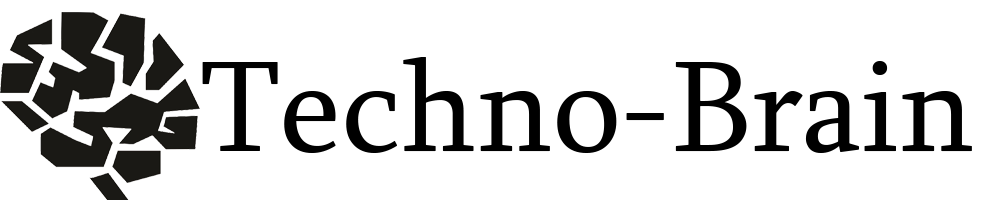
<style>
.page{position:relative;width:1000px;height:200px;background:#ffffff}
.page>*{position:absolute;margin:0}
.t1{font:133.3px "Sylfaen";color:#000000}
</style>
<div class="page">
<p class="t1" style="left:202px;top:57px;width:770px;height:96px">Techno-Brain</p>
</div>
